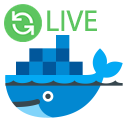
<style>
.page{position:relative;width:128px;height:128px;background:#ffffff}
.page>*{position:absolute;margin:0}
.t1{font:30px "MyriadPro-Regular";color:#5dc560}
</style>
<div class="page">
<p class="t1" style="left:47px;top:10px;width:50px;height:21px">LIVE</p>
</div>
